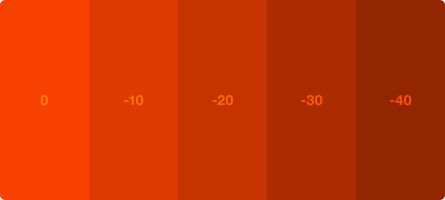
<style>
.page{position:relative;width:445px;height:200px;background:#f84000}
.page>*{position:absolute;margin:0}
.t1{font:14px "HelveticaNeue-Bold";letter-spacing:0.01em;color:#ff8000}
.t2{font:14px "HelveticaNeue-Bold";letter-spacing:0.01em;color:#ff7200}
.t3{font:14px "HelveticaNeue-Bold";letter-spacing:0.01em;color:#ff6600}
.t4{font:14px "HelveticaNeue-Bold";letter-spacing:0.01em;color:#ff5800}
.t5{font:14px "HelveticaNeue-Bold";letter-spacing:0.01em;color:#ff4c00}
</style>
<div class="page">
<p class="t1" style="left:40px;top:95px;width:8px;height:11px">0</p>
<p class="t2" style="left:124px;top:95px;width:20px;height:11px">-10</p>
<p class="t3" style="left:212px;top:95px;width:21px;height:11px">-20</p>
<p class="t4" style="left:301px;top:95px;width:22px;height:11px">-30</p>
<p class="t5" style="left:390px;top:95px;width:22px;height:11px">-40</p>
</div>
